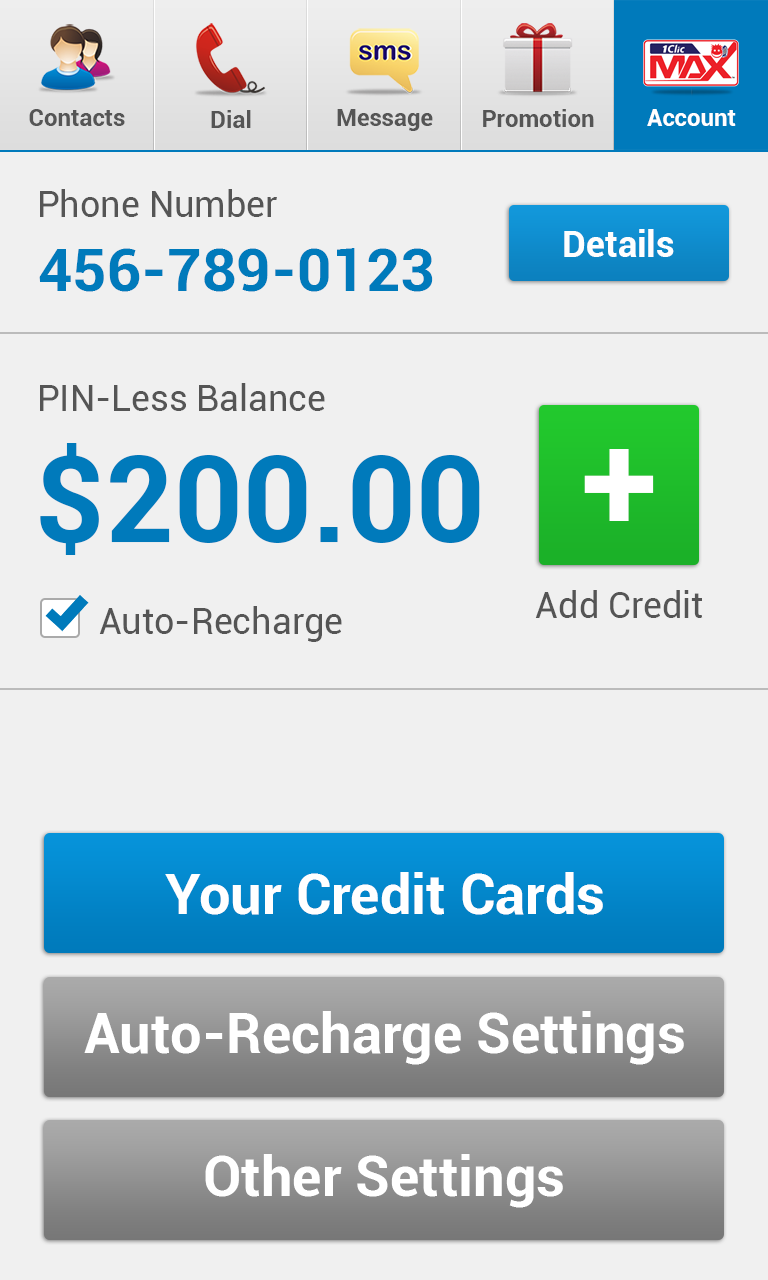
<style>
.page{position:relative;width:768px;height:1280px;background:#f0f0f0}
.page>*{position:absolute;margin:0}
.t1{font:24px "Roboto-Bold";color:#555555}
.t2{font:24px "Roboto-Bold";color:#ffffff}
.t3{font:36px "Roboto-Regular";color:#555555}
.t4{font:36px "Roboto-Bold";color:#ffffff}
.t5{font:60px "Roboto-Bold";color:#007abb}
.t6{font:120px "Roboto-Bold";color:#007abb}
.t7{font:140px "Roboto-Bold";color:#ffffff}
.t8{font:56px "Roboto-Bold";color:#ffffff}
</style>
<div class="page">
<p class="t1" style="left:29px;top:109px;width:96px;height:17px">Contacts</p>
<p class="t1" style="left:211px;top:110px;width:40px;height:18px">Dial</p>
<p class="t1" style="left:337px;top:109px;width:96px;height:22px">Message</p>
<p class="t1" style="left:483px;top:109px;width:111px;height:18px">Promotion</p>
<p class="t2" style="left:647px;top:109px;width:89px;height:17px">Account</p>
<p class="t3" style="left:40px;top:189px;width:237px;height:28px">Phone Number</p>
<p class="t4" style="left:564px;top:229px;width:110px;height:28px">Details</p>
<p class="t5" style="left:39px;top:248px;width:394px;height:44px">456-789-0123</p>
<p class="t3" style="left:40px;top:383px;width:285px;height:28px">PIN-Less Balance</p>
<p class="t6" style="left:40px;top:443px;width:440px;height:112px">$200.00</p>
<p class="t7" style="left:584px;top:449px;width:70px;height:72px">+</p>
<p class="t3" style="left:535px;top:590px;width:168px;height:28px">Add Credit</p>
<p class="t3" style="left:99px;top:606px;width:243px;height:36px">Auto-Recharge</p>
<p class="t8" style="left:165px;top:872px;width:438px;height:43px">Your Credit Cards</p>
<p class="t8" style="left:84px;top:1011px;width:600px;height:54px">Auto-Recharge Settings</p>
<p class="t8" style="left:205px;top:1154px;width:358px;height:54px">Other Settings</p>
</div>
